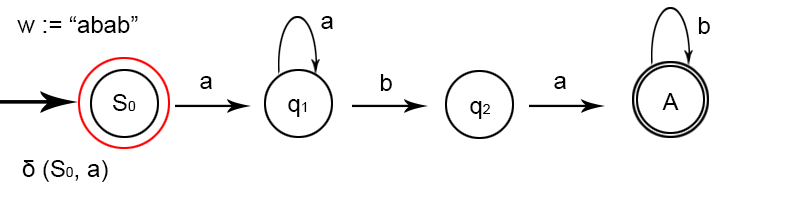
<style>
.page{position:relative;width:800px;height:200px;background:#ffffff}
.page>*{position:absolute;margin:0}
.t1{font:24px "ArialMT";color:#000000}
.t2{font:14px "ArialMT";color:#000000}
</style>
<div class="page">
<p class="t1" style="left:17px;top:16px;width:121px;height:17px">w := “abab”</p>
<p class="t1" style="left:321px;top:16px;width:12px;height:13px">a</p>
<p class="t1" style="left:698px;top:17px;width:12px;height:17px">b</p>
<p class="t1" style="left:200px;top:76px;width:12px;height:13px">a</p>
<p class="t1" style="left:380px;top:74px;width:12px;height:17px">b</p>
<p class="t1" style="left:554px;top:76px;width:12px;height:13px">a</p>
<p class="t1" style="left:113px;top:94px;width:23px;height:17px">S<span class="t2">0</span></p>
<p class="t1" style="left:288px;top:99px;width:19px;height:18px">q<span class="t2">1</span></p>
<p class="t1" style="left:470px;top:101px;width:20px;height:18px">q<span class="t2">2</span></p>
<p class="t1" style="left:662px;top:93px;width:17px;height:17px">A</p>
<p class="t1" style="left:22px;top:160px;width:86px;height:22px">δ (S<span class="t2">0</span>, a)</p>
</div>
